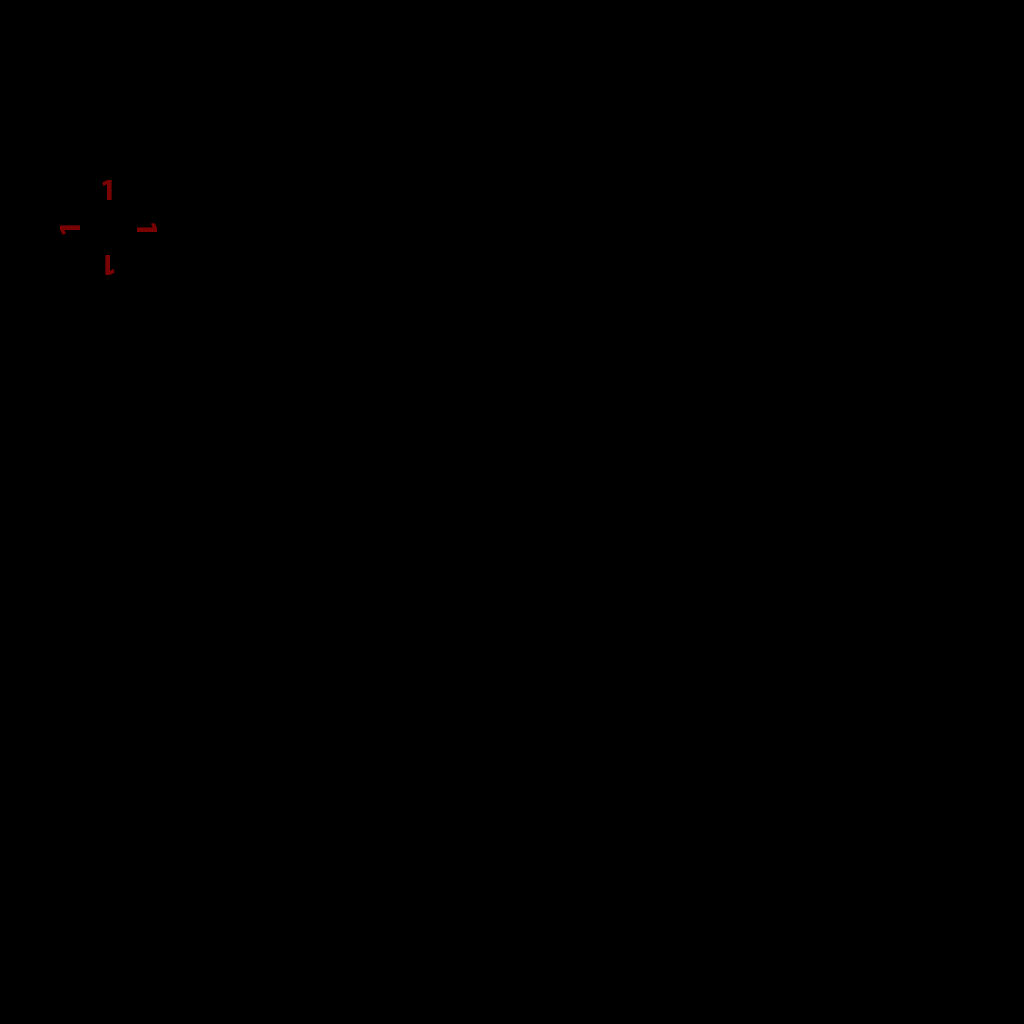
<style>
.page{position:relative;width:1024px;height:1024px;background:#000000}
.page>*{position:absolute;margin:0}
.t1{font:30px "MyriadPro-Bold";color:#7b0202}
</style>
<div class="page">
<p class="t1" style="left:102px;top:180px;width:10px;height:20px">1</p>
<p class="t1" style="left:60px;top:225px;width:20px;height:10px;rotate:-90deg">1</p>
<p class="t1" style="left:137px;top:223px;width:20px;height:9px;rotate:90deg">1</p>
<p class="t1" style="left:105px;top:255px;width:10px;height:20px;rotate:-180deg">1</p>
</div>
